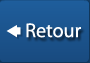
<style>
.page{position:relative;width:90px;height:63px}
.page>*{position:absolute;margin:0}
.t1{font:20px "MyriadPro-Regular";color:#ffffff}
</style>
<div class="page">
<p class="t1" style="left:26px;top:23px;width:55px;height:15px">Retour</p>
</div>
